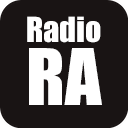
<style>
.page{position:relative;width:128px;height:128px;background:#191414}
.page>*{position:absolute;margin:0}
.t1{font:32px "Impact";color:#ffffff}
.t2{font:72px "Impact";color:#ffffff}
</style>
<div class="page">
<p class="t1" style="left:27px;top:16px;width:74px;height:27px">Radio</p>
<p class="t2" style="left:29px;top:48px;width:73px;height:57px">RA</p>
</div>
